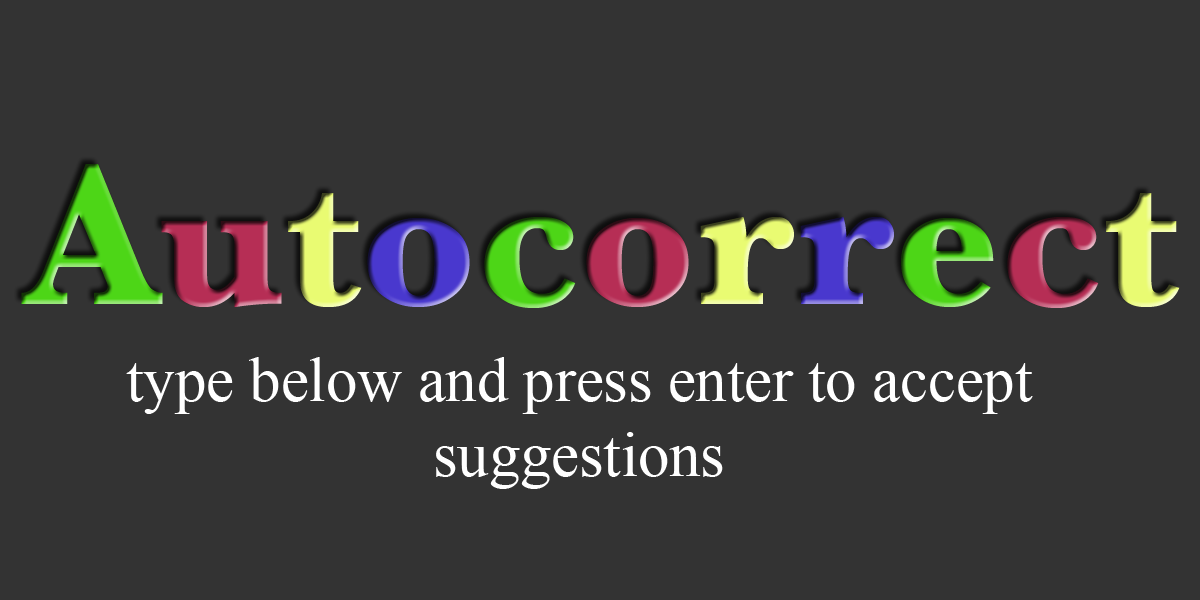
<style>
.page{position:relative;width:1200px;height:600px;background:#333333}
.page>*{position:absolute;margin:0}
.t1{font:208.3px "Baskerville-Bold";color:#4dd617}
.t2{font:208.3px "Baskerville-Bold";color:#b62e55}
.t3{font:208.3px "Baskerville-Bold";color:#e9fb72}
.t4{font:208.3px "Baskerville-Bold";color:#4938ce}
.t5{font:62.5px "TimesNewRomanPSMT";color:#ffffff}
</style>
<div class="page">
<p class="t1" style="left:21px;top:164px;width:1159px;height:144px">A<span class="t2">u</span><span class="t3">t</span><span class="t4">o</span>c<span class="t2">o</span><span class="t3">r</span><span class="t4">r</span>e<span class="t2">c</span><span class="t3">t</span></p>
<p class="t5" style="left:126px;top:357px;width:907px;height:132px;text-align:center">type below and press enter to accept <br>suggestions</p>
</div>
